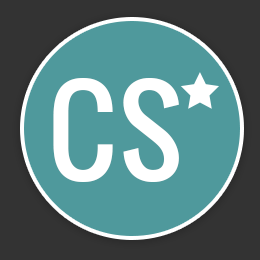
<style>
.page{position:relative;width:260px;height:260px;background:#4f999c}
.page>*{position:absolute;margin:0}
.t1{font:117.5px "Oswald";color:#ffffff}
</style>
<div class="page">
<p class="t1" style="left:53px;top:78px;width:126px;height:104px">CS</p>
</div>
